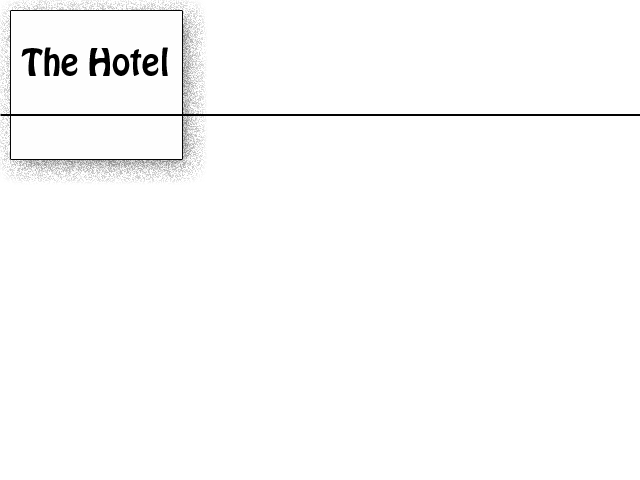
<style>
.page{position:relative;width:640px;height:480px;background:#ffffff}
.page>*{position:absolute;margin:0}
.t1{font:33.3px "HoboStd";color:#000000}
</style>
<div class="page">
<p class="t1" style="left:21px;top:47px;width:147px;height:29px">The Hotel</p>
</div>
